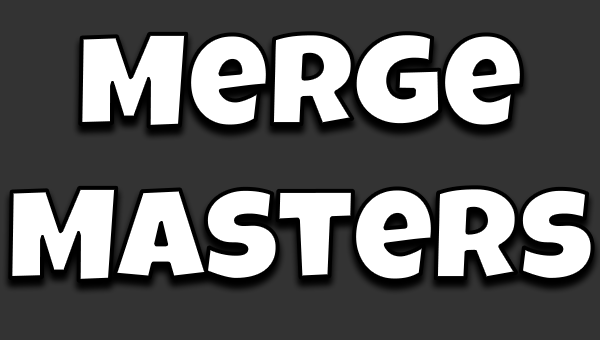
<style>
.page{position:relative;width:600px;height:340px;background:#333333}
.page>*{position:absolute;margin:0}
.t1{font:128.1px "LuckiestGuy-Regular";color:#ffffff;scale:1.1 1}
</style>
<div class="page">
<p class="t1" style="left:10px;top:33px;width:583px;height:248px;text-align:center">Merge<br>Masters</p>
</div>
